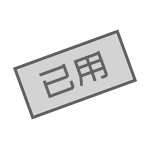
<style>
.page{position:relative;width:150px;height:150px;background:#ffffff}
.page>*{position:absolute;margin:0}
.t1{font:36px "zcoolwenyiti";color:#626262}
</style>
<div class="page">
<p class="t1" style="left:39px;top:50px;width:69px;height:49px;rotate:-20deg">已用</p>
</div>
